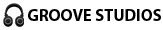
<style>
.page{position:relative;width:163px;height:30px;background:#ffffff}
.page>*{position:absolute;margin:0}
.t1{font:16.6px "MyriadPro-Bold";color:#000000}
</style>
<div class="page">
<p class="t1" style="left:28px;top:9px;width:133px;height:12px">GROOVE STUDIOS</p>
</div>
